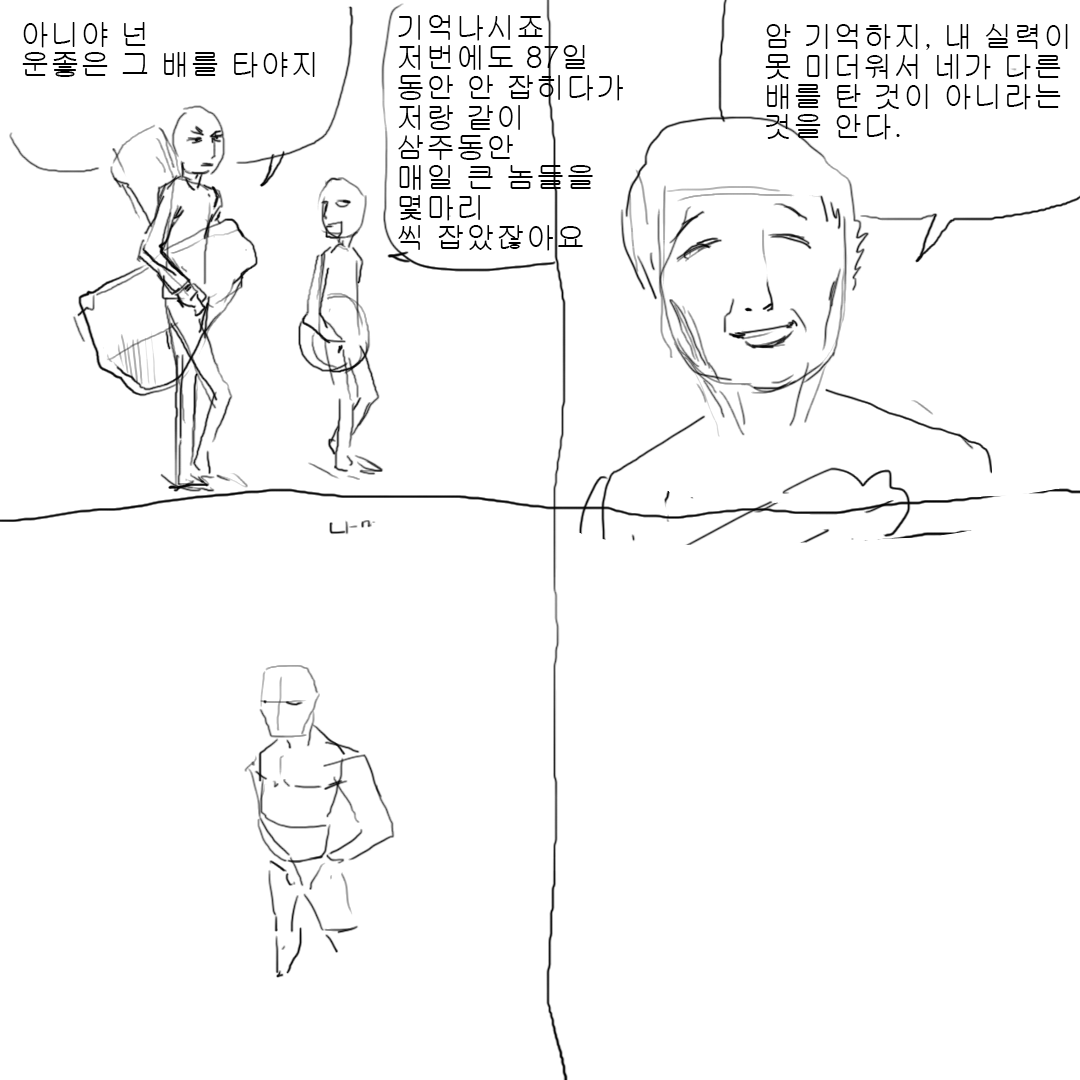
<style>
.page{position:relative;width:1080px;height:1080px;background:#ffffff}
.page>*{position:absolute;margin:0}
.t1{font:30px/30px "Gulim";color:#000000}
</style>
<div class="page">
<p class="t1" style="left:398px;top:15px;width:225px;height:236px">기억나시죠<br>저번에도 87일<br>동안 안 잡히다가<br>저랑 같이 <br>삼주동안<br>매일 큰 놈들을 <br>몇마리<br>씩 잡았잖아요</p>
<p class="t1" style="left:22px;top:22px;width:293px;height:56px">아니야 넌 <br>운좋은 그 배를 타야지</p>
<p class="t1" style="left:765px;top:24px;width:303px;height:116px">암 기억하지, 내 실력이 <br>못 미더워서 네가 다른<br>배를 탄 것이 아니라는 <br>것을 안다.</p>
</div>
